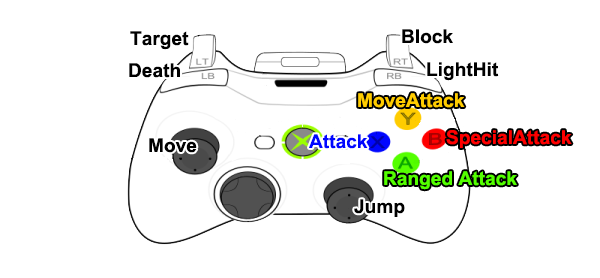
<style>
.page{position:relative;width:600px;height:278px;background:#ffffff}
.page>*{position:absolute;margin:0}
.t1{font:19.1px "Arial-BoldMT";color:#000000}
.t2{font:19.1px "Arial-BoldMT";color:#ffcc00}
.t3{font:19.1px "Arial-BoldMT";color:#0006ff}
.t4{font:19.1px "Arial-BoldMT";color:#ff0000}
.t5{font:19.1px "Arial-BoldMT";color:#54ff00}
</style>
<div class="page">
<p class="t1" style="left:402px;top:29px;width:51px;height:15px">Block</p>
<p class="t1" style="left:130px;top:31px;width:59px;height:19px">Target</p>
<p class="t1" style="left:129px;top:63px;width:51px;height:15px">Death</p>
<p class="t1" style="left:427px;top:62px;width:72px;height:19px">LightHit</p>
<p class="t2" style="left:358px;top:93px;width:107px;height:15px">MoveAttack</p>
<p class="t3" style="left:309px;top:134px;width:59px;height:15px">Attack</p>
<p class="t4" style="left:446px;top:130px;width:126px;height:18px">SpecialAttack</p>
<p class="t1" style="left:149px;top:138px;width:48px;height:15px">Move</p>
<p class="t5" style="left:384px;top:171px;width:133px;height:19px">Ranged Attack</p>
<p class="t1" style="left:354px;top:199px;width:51px;height:18px">Jump</p>
</div>
